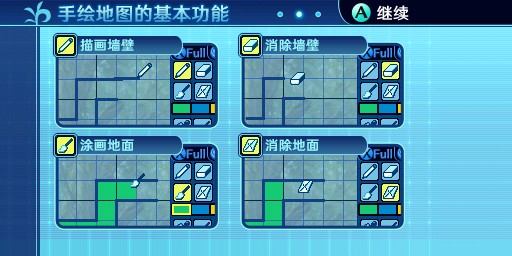
<style>
.page{position:relative;width:512px;height:256px}
.page>*{position:absolute;margin:0}
.t1{font:18.7px "HYWenHei-FEW";letter-spacing:0.025em}
.t2{font:16px "HYWenHei-FEW";letter-spacing:0.025em;color:#fefefe}
.t3{font:13.3px "HYWenHei-FEW";letter-spacing:0.025em;color:#94f7ff}
</style>
<div class="page">
<p class="t1" style="left:58px;top:4px;width:171px;height:19px">手绘地图的基本功能</p>
<p class="t2" style="left:377px;top:5px;width:32px;height:16px">继续</p>
<p class="t3" style="left:80px;top:38px;width:54px;height:13px">描画墙壁</p>
<p class="t3" style="left:265px;top:38px;width:54px;height:14px">消除墙壁</p>
<p class="t3" style="left:80px;top:139px;width:54px;height:12px">涂画地面</p>
<p class="t3" style="left:265px;top:139px;width:54px;height:13px">消除地面</p>
</div>
